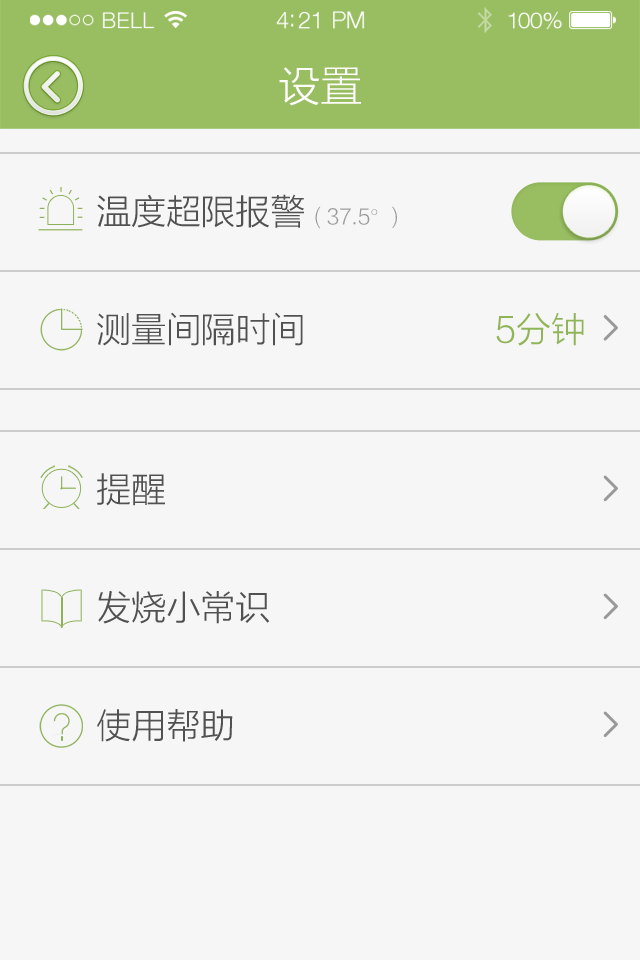
<style>
.page{position:relative;width:640px;height:960px;background:#f6f6f6}
.page>*{position:absolute;margin:0}
.t1{font:42.7px "FZLTXHK";letter-spacing:-0.02em;color:#ffffff}
.t2{font:35.6px "FZLTXHK";letter-spacing:-0.02em;color:#515151}
.t3{font:21.3px "FZLTXHK";letter-spacing:-0.02em;color:#999999}
.t4{font:35.6px "FZLTXHK";letter-spacing:-0.02em;color:#90b559}
</style>
<div class="page">
<p class="t1" style="left:279px;top:67px;width:82px;height:39px">设置</p>
<p class="t2" style="left:97px;top:194px;width:207px;height:34px">温度超限报警</p>
<p class="t3" style="left:315px;top:206px;width:82px;height:23px">( 37.5°)</p>
<p class="t2" style="left:97px;top:312px;width:206px;height:34px">测量间隔时间</p>
<p class="t4" style="left:496px;top:313px;width:88px;height:33px">5分钟</p>
<p class="t2" style="left:97px;top:473px;width:68px;height:33px">提醒</p>
<p class="t2" style="left:98px;top:591px;width:172px;height:33px">发烧小常识</p>
<p class="t2" style="left:97px;top:709px;width:136px;height:33px">使用帮助</p>
</div>
